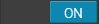
<style>
.page{position:relative;width:99px;height:24px;background:#3e3e3e}
.page>*{position:absolute;margin:0}
.t1{font:14px "Roboto-Regular";letter-spacing:-0.025em;color:#ffffff}
</style>
<div class="page">
<p class="t1" style="left:64px;top:8px;width:18px;height:10px">ON</p>
</div>
